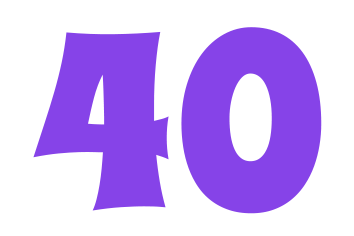
<style>
.page{position:relative;width:354px;height:236px;background:#ffffff}
.page>*{position:absolute;margin:0}
.t1{font:250px "SpicyRice-Regular";color:#8643e8}
</style>
<div class="page">
<p class="t1" style="left:33px;top:27px;width:289px;height:187px">40</p>
</div>
